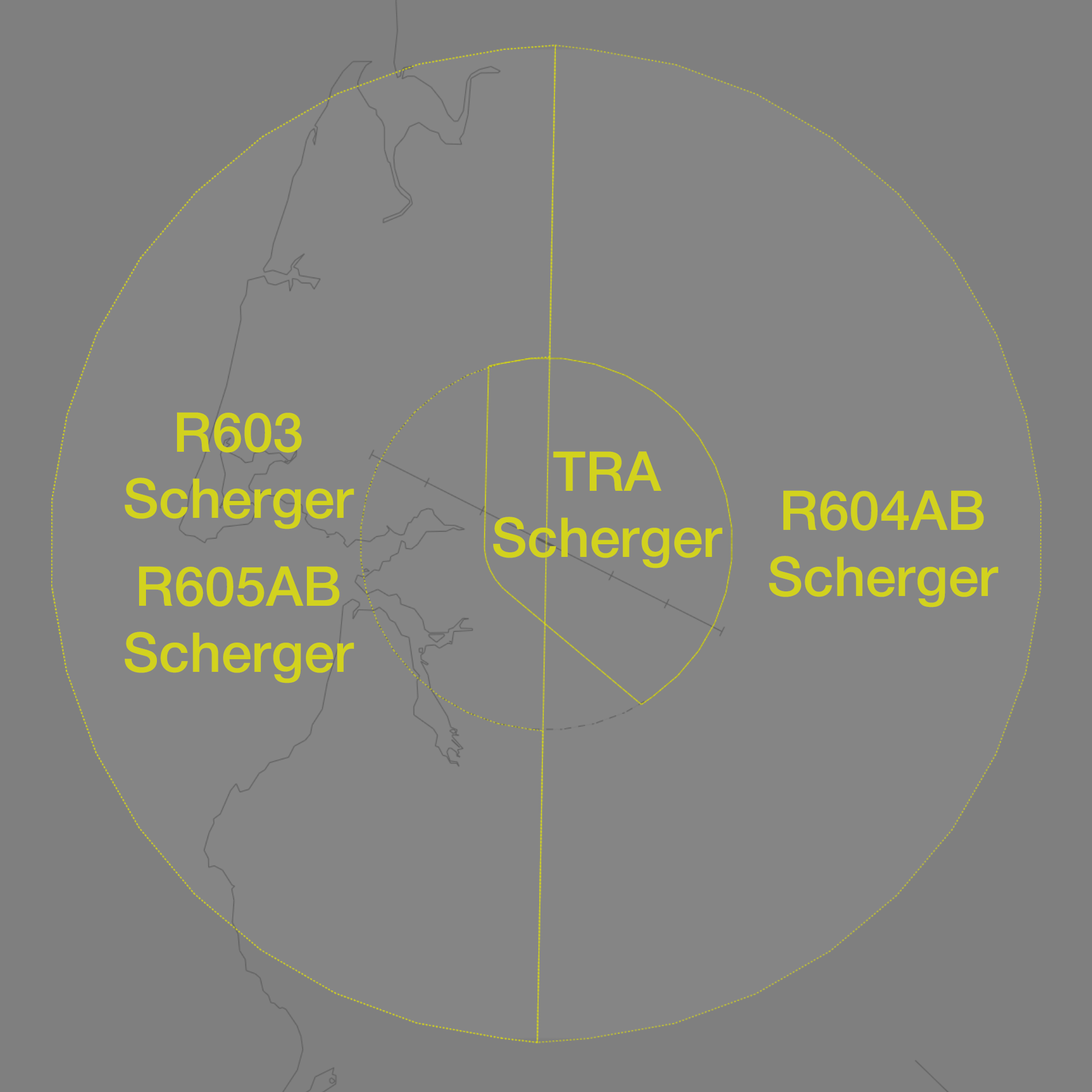
<style>
.page{position:relative;width:1092px;height:1092px;background:#858585}
.page>*{position:absolute;margin:0}
.t1{font:55.2px "HelveticaNeue-Medium";color:#d2d21e}
</style>
<div class="page">
<p class="t1" style="left:125px;top:412px;width:229px;height:117px;text-align:center">R603<br>Scherger</p>
<p class="t1" style="left:493px;top:451px;width:229px;height:117px;text-align:center">TRA<br>Scherger</p>
<p class="t1" style="left:769px;top:490px;width:229px;height:117px;text-align:center">R604AB<br>Scherger</p>
<p class="t1" style="left:125px;top:566px;width:229px;height:117px;text-align:center">R605AB<br>Scherger</p>
</div>
